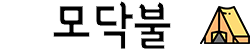
<style>
.page{position:relative;width:250px;height:50px;background:#ffffff}
.page>*{position:absolute;margin:0}
.t1{font:50px "SangSangTitleB";color:#000000}
</style>
<div class="page">
<p class="t1" style="left:53px;top:1px;width:118px;height:48px">모닥불</p>
</div>
